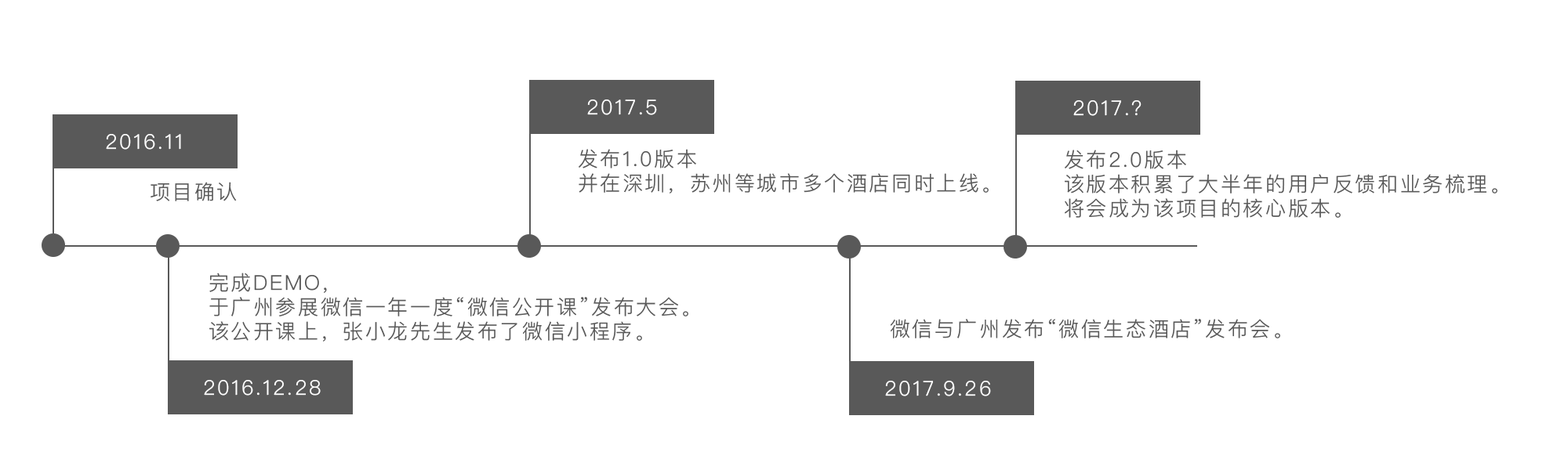
<style>
.page{position:relative;width:1568px;height:470px;background:#ffffff}
.page>*{position:absolute;margin:0}
.t1{font:20.4px "PingFangSC-Light";letter-spacing:0.1em;color:#ffffff}
.t2{font:20.4px/31.4px "PingFangSC-Light";letter-spacing:0.1em;color:#595959}
.t3{font:20.4px "PingFangSC-Light";letter-spacing:0.1em;color:#595959}
</style>
<div class="page">
<p class="t1" style="left:587px;top:100px;width:70px;height:15px">2017.5</p>
<p class="t1" style="left:1073px;top:100px;width:69px;height:16px">2017.？</p>
<p class="t1" style="left:106px;top:134px;width:75px;height:16px">2016.11</p>
<p class="t2" style="left:579px;top:149px;width:410px;height:45px">发布1.0版本<br>并在深圳，苏州等城市多个酒店同时上线。</p>
<p class="t2" style="left:1065px;top:150px;width:432px;height:68px">发布2.0版本<br>该版本积累了大半年的用户反馈和业务梳理。<br>将会成为该项目的核心版本。</p>
<p class="t3" style="left:151px;top:182px;width:86px;height:19px">项目确认</p>
<p class="t2" style="left:209px;top:273px;width:479px;height:69px">完成DEMO，<br>于广州参展微信一年一度“微信公开课”发布大会。<br>该公开课上，张小龙先生发布了微信小程序。</p>
<p class="t3" style="left:890px;top:319px;width:390px;height:20px">微信与广州发布“微信生态酒店”发布会。</p>
<p class="t1" style="left:204px;top:380px;width:117px;height:16px">2016.12.28</p>
<p class="t1" style="left:885px;top:381px;width:106px;height:16px">2017.9.26</p>
</div>
